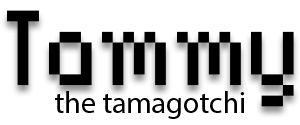
<style>
.page{position:relative;width:300px;height:125px;background:#ffffff}
.page>*{position:absolute;margin:0}
.t1{font:170px "BitPotionExt";color:#000000}
.t2{font:30px "MyriadPro-Regular";color:#000000}
</style>
<div class="page">
<p class="t1" style="left:7px;top:10px;width:287px;height:97px">Tammy</p>
<p class="t2" style="left:55px;top:91px;width:189px;height:28px">the tamagotchi</p>
</div>
